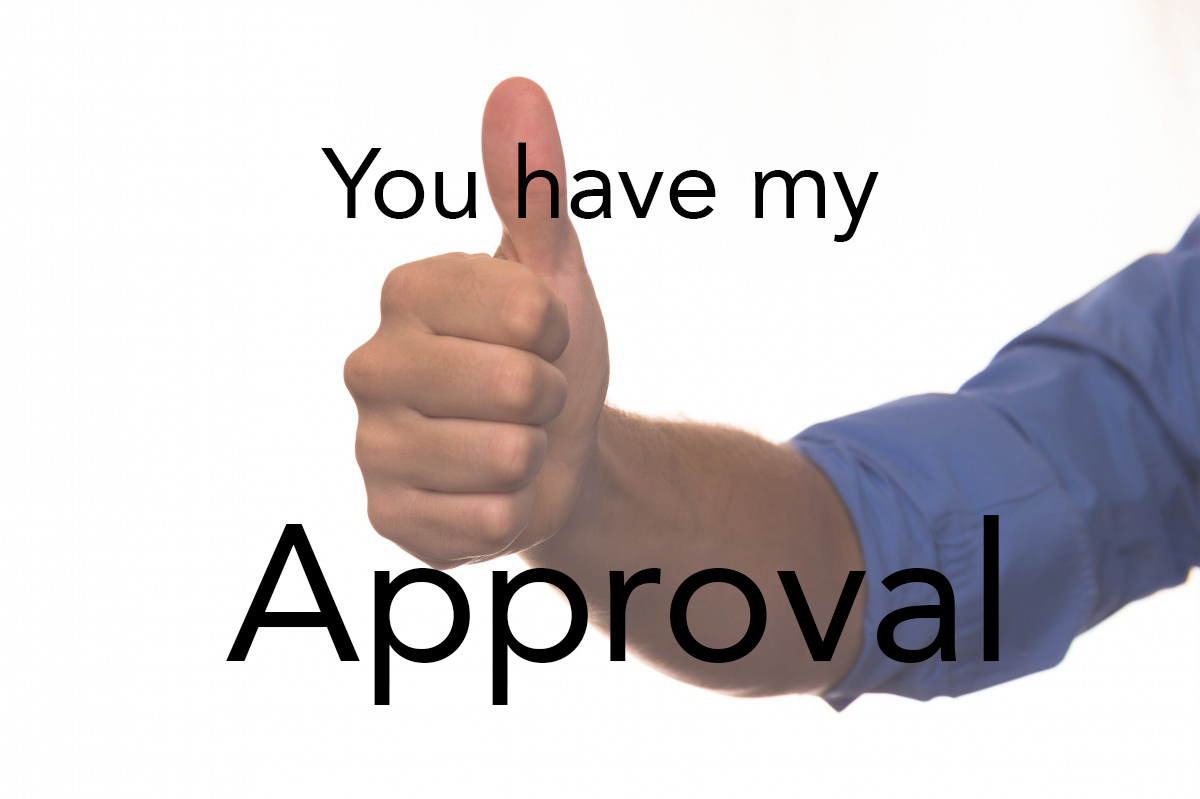
<style>
.page{position:relative;width:1200px;height:799px;background:#ffffff}
.page>*{position:absolute;margin:0}
.t1{font:98.9px "Avenir-Roman";color:#000000}
.t2{font:192.7px "Avenir-Roman";color:#000000}
</style>
<div class="page">
<p class="t1" style="left:321px;top:142px;width:558px;height:100px">You have my</p>
<p class="t2" style="left:226px;top:515px;width:773px;height:190px">Approval</p>
</div>
